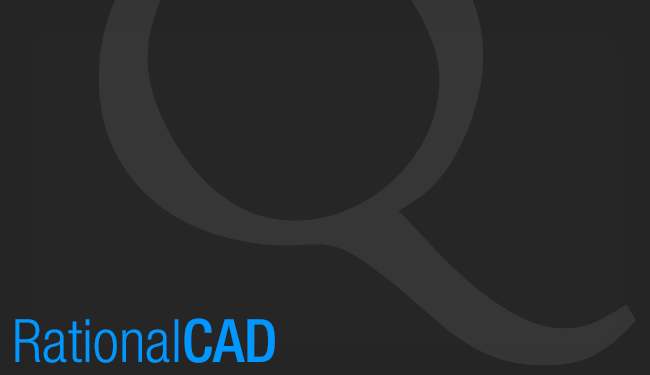
<style>
.page{position:relative;width:650px;height:375px;background:#262626}
.page>*{position:absolute;margin:0}
.t1{font:60px "HelveticaNeueLTStd-LtCn";color:#0097ff}
.t2{font:60px "HelveticaNeueLTStd-MdCn";color:#0097ff}
</style>
<div class="page">
<p class="t1" style="left:15px;top:318px;width:260px;height:45px">Rational<span class="t2">CAD</span></p>
</div>
